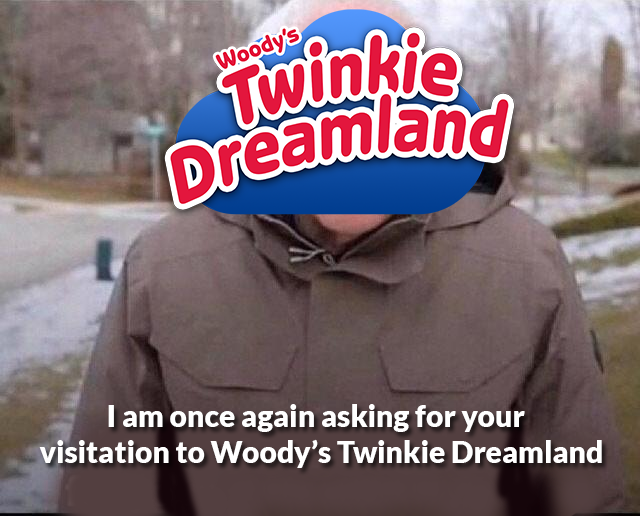
<style>
.page{position:relative;width:640px;height:516px}
.page>*{position:absolute;margin:0}
.t1{font:30px "Lato-Black";color:#ffffff}
</style>
<div class="page">
<p class="t1" style="left:39px;top:404px;width:563px;height:64px;text-align:center">I am once again asking for your <br> visitation to Woody’s Twinkie Dreamland</p>
</div>
